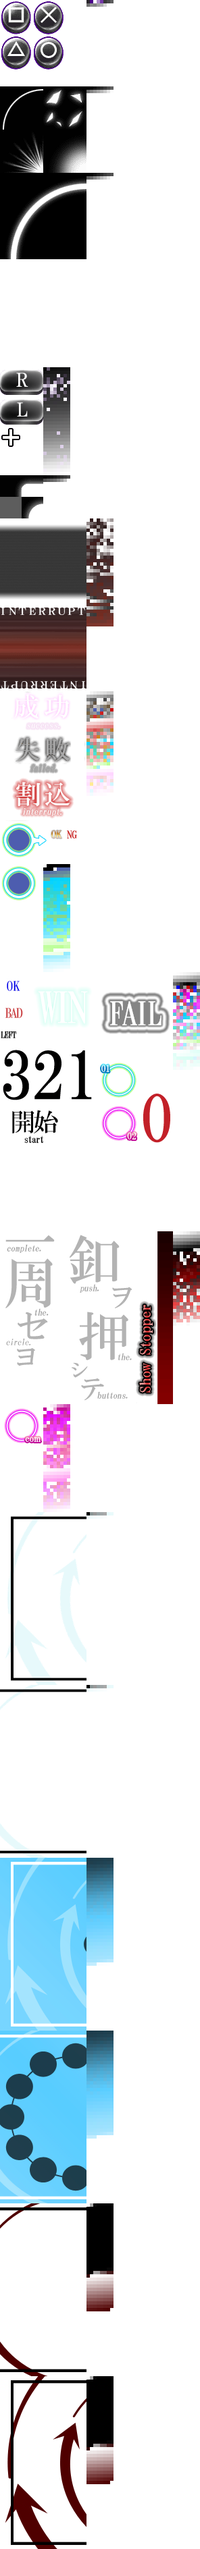
<style>
.page{position:relative;width:200px;height:2549px;background:#ffffff}
.page>*{position:absolute;margin:0}
.t1{font:9px "HGMinchoB";color:#ffffff;font-style:italic}
.t2{font:9px "HGMinchoB";color:#a9a9a9;font-style:italic}
.t3{font:26.1px "HGMinchoB";letter-spacing:0.1em;color:#fefefe}
.t4{font:9px "HGMinchoB";color:#fefefe;font-style:italic}
.t5{font:10.8px "HGMinchoB";letter-spacing:-0.025em}
.t6{font:8.1px "HGMinchoB";letter-spacing:-0.025em;color:#cc2222}
.t7{font:13.5px/27px "HGMinchoB";letter-spacing:-0.1em;color:#cb3a3d;text-transform:uppercase}
.t8{font:13.5px/28.8px "HGMinchoB";letter-spacing:-0.5em;color:#0000e8;text-transform:uppercase}
.t9{font:13.5px/28.8px "HGMinchoB";color:#0000e8;text-transform:uppercase}
.t10{font:43.2px "HGMinchoB";letter-spacing:-0.1em;color:#ffffff;text-transform:uppercase}
.t11{font:32.4px "HGMinchoB";letter-spacing:-0.1em;color:#ffffff;text-transform:uppercase}
.t12{font:9px "HGMinchoB";letter-spacing:-0.075em;color:#000000;text-transform:uppercase}
.t13{font:9.9px/12.6px "HGMinchoB";letter-spacing:-0.1em;color:#000000}
.t14{font:25.2px/27px "HGMinchoB";letter-spacing:-0.1em;color:#000000;text-transform:uppercase}
.t15{font:9px "HGMinchoB";letter-spacing:-0.025em;color:#999999;font-style:italic}
.t16{font:14.6px "HGMinchoB";letter-spacing:-0.025em;scale:1.11 1}
</style>
<div class="page">
<p class="t1" style="left:27px;top:724px;width:32px;height:4px">success.</p>
<p class="t2" style="left:30px;top:764px;width:27px;height:8px">failed.</p>
<p class="t3" style="left:16px;top:782px;width:54px;height:25px">割込</p>
<p class="t4" style="left:22px;top:808px;width:39px;height:8px"><span class="t3"><br></span>interrupt.</p>
<p class="t5" style="left:51px;top:830px;width:11px;height:8px">OK</p>
<p class="t6" style="left:67px;top:830px;width:10px;height:9px">NG</p>
<p class="t7" style="left:5px;top:981px;width:18px;height:37px;text-align:center"><span class="t8"> </span><span class="t9">ok<br> </span>BAD</p>
<p class="t10" style="left:38px;top:991px;width:50px;height:33px">win</p>
<p class="t11" style="left:110px;top:1001px;width:51px;height:24px">fail</p>
<p class="t12" style="left:1px;top:1031px;width:16px;height:7px">LEFT</p>
<p class="t13" style="left:12px;top:1110px;width:46px;height:33px;text-align:center"><span class="t14">開始<br></span>start</p>
<p class="t15" style="left:7px;top:1244px;width:34px;height:9px">complete.</p>
<p class="t15" style="left:80px;top:1284px;width:19px;height:9px">push.</p>
<p class="t15" style="left:34px;top:1308px;width:15px;height:8px">the.</p>
<p class="t16" style="left:139px;top:1305px;width:14px;height:88px;rotate:-90deg">Show Stopper</p>
<p class="t15" style="left:6px;top:1338px;width:24px;height:7px">circle.</p>
<p class="t15" style="left:118px;top:1353px;width:14px;height:7px">the.</p>
<p class="t15" style="left:97px;top:1391px;width:31px;height:8px">buttons.</p>
</div>
